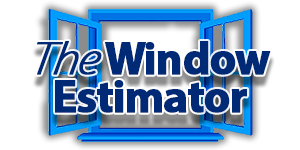
<style>
.page{position:relative;width:300px;height:150px;background:#ffffff}
.page>*{position:absolute;margin:0}
.t1{font:46.1px/37.7px "MyriadPro-Bold";letter-spacing:-0.04em;color:#002a76;font-weight:bold}
.t2{font:46.1px/37.7px "MyriadPro-LightSemiExtIt";letter-spacing:-0.04em;color:#002a76;font-weight:bold;font-style:italic}
</style>
<div class="page">
<p class="t1" style="left:37px;top:41px;width:234px;height:72px;text-align:center"><span class="t2">The</span> Window<br>Estimator</p>
</div>
